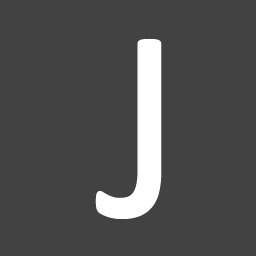
<style>
.page{position:relative;width:256px;height:256px;background:#424242}
.page>*{position:absolute;margin:0}
.t1{font:280.1px "Calibri";letter-spacing:0.075em;color:#ffffff}
</style>
<div class="page">
<p class="t1" style="left:95px;top:38px;width:67px;height:181px">J</p>
</div>
